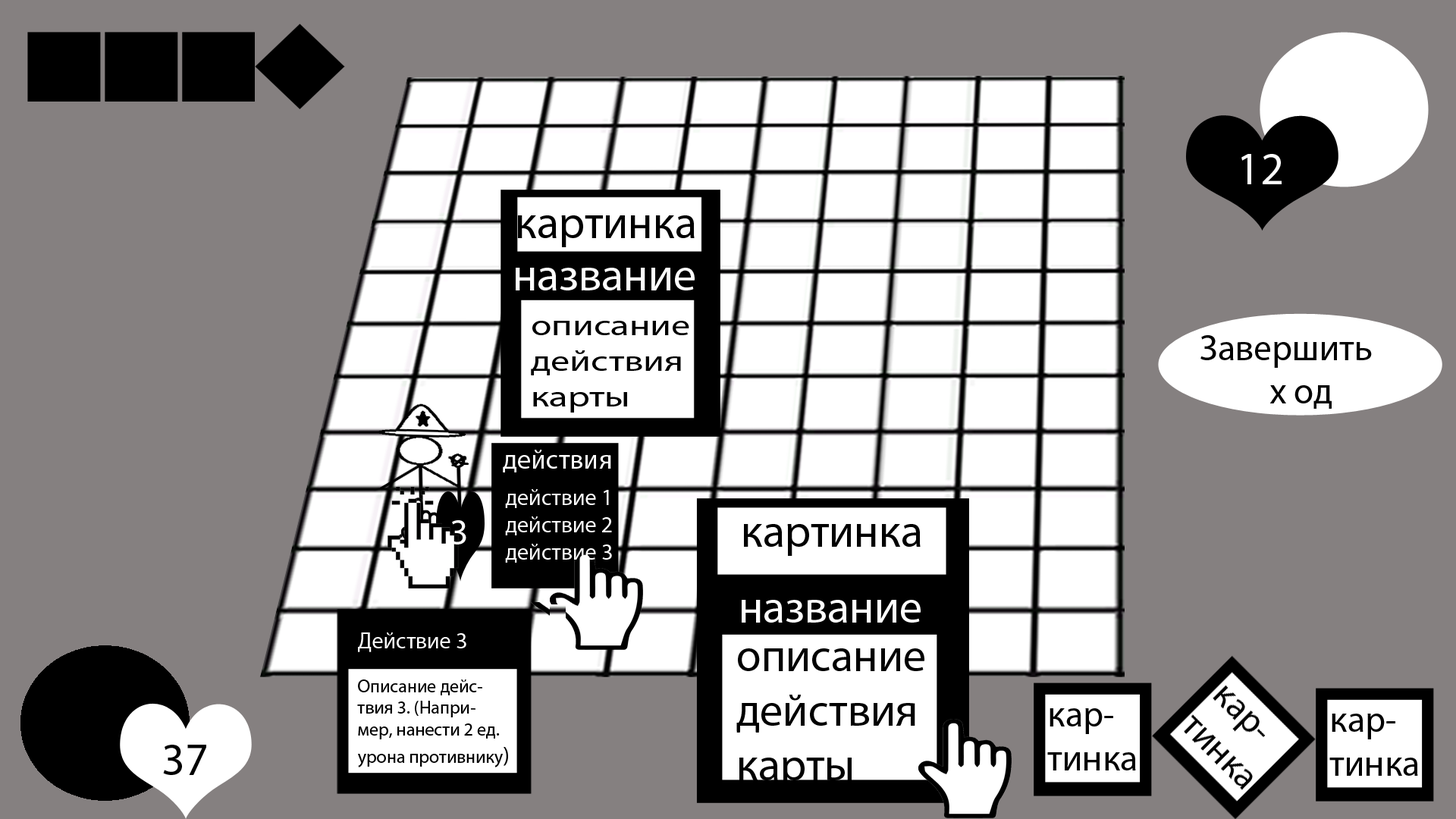
<style>
.page{position:relative;width:1456px;height:819px;background:#858080}
.page>*{position:absolute;margin:0}
.t1{font:45.5px "MyriadPro-Regular";color:#ffffff}
.t2{font:45.5px "MyriadPro-Regular";color:#000000}
.t3{font:29.7px "MyriadPro-Regular";color:#000000;scale:1.29 1}
.t4{font:36.4px "MyriadPro-Regular";color:#010101}
.t5{font:27.3px "MyriadPro-Regular";color:#ffffff}
.t6{font:22.7px "MyriadPro-Regular";color:#ffffff}
.t7{font:36.4px "MyriadPro-Regular";color:#ffffff}
.t8{font:18.2px "MyriadPro-Regular";color:#000000}
.t9{font:22.7px "MyriadPro-Regular";color:#000000}
</style>
<div class="page">
<p class="t1" style="left:1241px;top:154px;width:41px;height:30px">12</p>
<p class="t2" style="left:518px;top:215px;width:177px;height:32px">картинка</p>
<p class="t1" style="left:516px;top:268px;width:179px;height:22px">название</p>
<p class="t3" style="left:531px;top:321px;width:158px;height:92px">описание<br>действия<br>карты</p>
<p class="t4" style="left:1200px;top:335px;width:172px;height:74px">Завершить <br>         х од</p>
<p class="t5" style="left:503px;top:450px;width:108px;height:22px">действия</p>
<p class="t6" style="left:505px;top:489px;width:107px;height:74px">действие 1<br>действие 2<br>действие 3</p>
<p class="t7" style="left:451px;top:520px;width:15px;height:24px">3</p>
<p class="t2" style="left:744px;top:524px;width:177px;height:32px">картинка</p>
<p class="t1" style="left:742px;top:600px;width:179px;height:23px">название</p>
<p class="t6" style="left:358px;top:632px;width:108px;height:20px">Действие 3</p>
<p class="t2" style="left:736px;top:648px;width:188px;height:141px">описание<br>действия<br>карты</p>
<p class="t8" style="left:357px;top:679px;width:151px;height:88px">Описание дейс-<br>твия 3. (Напри-<br>мер, нанести 2 ед.<br>урона противнику<span class="t9">)</span></p>
<p class="t2" style="left:163px;top:745px;width:43px;height:30px">37</p>
</div>
